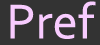
<style>
.page{position:relative;width:100px;height:45px;background:#333333}
.page>*{position:absolute;margin:0}
.t1{font:51px "Corbel";color:#f8ccff}
</style>
<div class="page">
<p class="t1" style="left:10px;top:1px;width:86px;height:38px">Pref</p>
</div>
